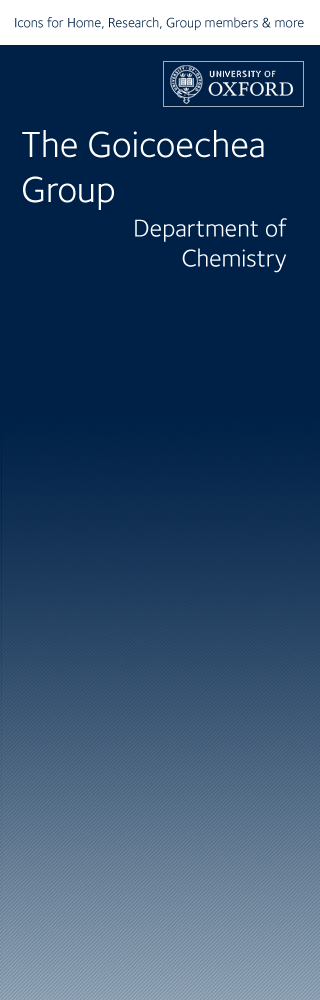
<style>
.page{position:relative;width:320px;height:1000px;background:#002147}
.page>*{position:absolute;margin:0}
.t1{font:14px "FoundrySterling-Book";color:#002147}
.t2{font:37.5px "FoundrySterling-Book";color:#ffffff}
.t3{font:25px "FoundrySterling-Book";color:#ffffff}
</style>
<div class="page">
<p class="t1" style="left:15px;top:17px;width:289px;height:14px">Icons for Home, Research, Group members &amp; more</p>
<p class="t2" style="left:22px;top:130px;width:242px;height:80px">The Goicoechea<br>Group</p>
<p class="t3" style="left:135px;top:218px;width:152px;height:55px;text-align:right">Department of<br> Chemistry</p>
</div>
